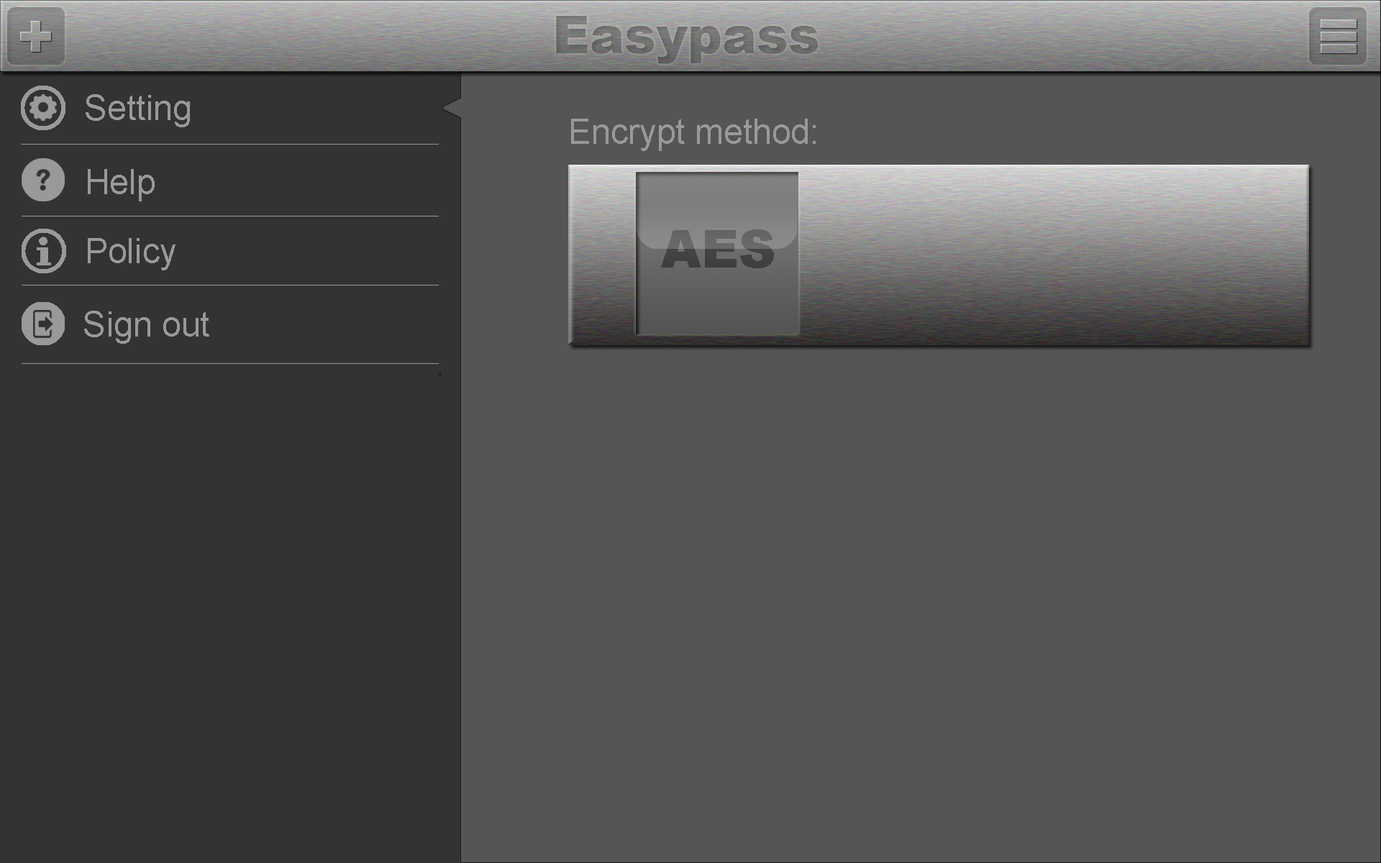
<style>
.page{position:relative;width:1381px;height:863px;background:#555555}
.page>*{position:absolute;margin:0}
.t1{font:34.5px "ArialMT";color:#999999}
.t2{font:51.8px "Arial-Black"}
</style>
<div class="page">
<p class="t1" style="left:86px;top:94px;width:104px;height:33px">Setting</p>
<p class="t1" style="left:571px;top:119px;width:245px;height:32px">Encrypt method:</p>
<p class="t1" style="left:88px;top:169px;width:67px;height:32px">Help</p>
<p class="t2" style="left:661px;top:229px;width:113px;height:39px">AES</p>
<p class="t1" style="left:88px;top:238px;width:88px;height:32px">Policy</p>
<p class="t1" style="left:84px;top:311px;width:125px;height:33px">Sign out</p>
</div>
